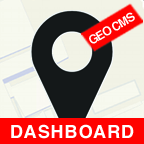
<style>
.page{position:relative;width:144px;height:144px}
.page>*{position:absolute;margin:0}
.t1{font:12px "Helvetica-Bold";letter-spacing:-0.075em;color:#ffffff;text-transform:uppercase}
.t2{font:18px "Helvetica-Bold";letter-spacing:0.05em;color:#ffffff;text-transform:uppercase}
</style>
<div class="page">
<p class="t1" style="left:89px;top:12px;width:46px;height:32px;rotate:-30deg">Geo CMS</p>
<p class="t2" style="left:11px;top:124px;width:123px;height:15px">DASHBOARD</p>
</div>
